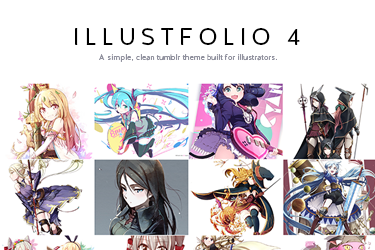
<style>
.page{position:relative;width:375px;height:250px;background:#ffffff}
.page>*{position:absolute;margin:0}
.t1{font:23.9px "HalisGR-Book";letter-spacing:0.2em;color:#000000}
.t2{font:7.8px "HalisGR-Book";color:#90919e}
</style>
<div class="page">
<p class="t1" style="left:75px;top:28px;width:225px;height:18px">ILLUSTFOLIO 4</p>
<p class="t2" style="left:99px;top:54px;width:178px;height:8px">A simple, clean tumblr theme built for illustrators.</p>
</div>
